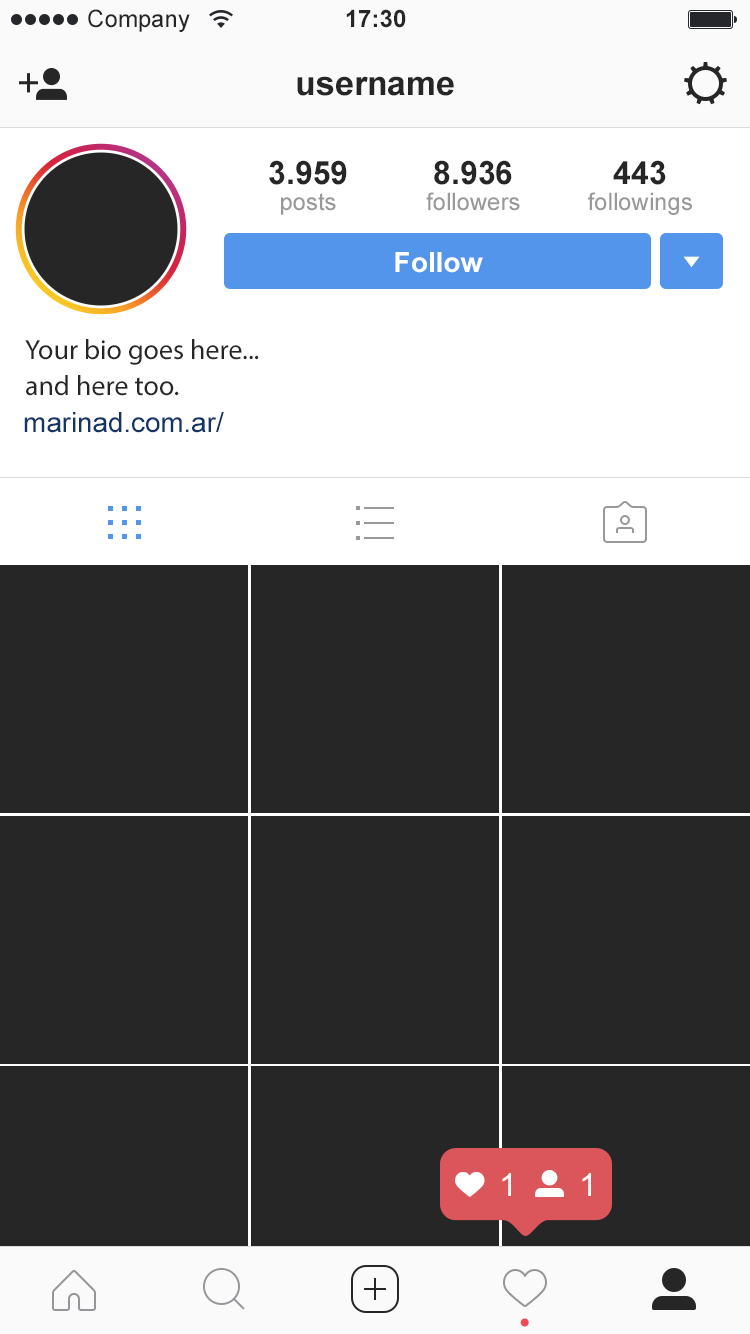
<style>
.page{position:relative;width:750px;height:1334px;background:#262627}
.page>*{position:absolute;margin:0}
.t1{font:24px "ArialMT";color:#262626}
.t2{font:24px "Arial-BoldMT";color:#262626}
.t3{font:34px "Arial-BoldMT";letter-spacing:-0.005em;color:#262627}
.t4{font:32px "Arial-BoldMT";color:#262626}
.t5{font:24px "ArialMT";color:#999999}
.t6{font:28px "Arial-BoldMT";color:#ffffff}
.t7{font:28px/36px "MyriadPro-Regular";color:#262627}
.t8{font:27.7px "ArialMT";color:#133566}
.t9{font:32px "ArialMT";color:#ffffff}
</style>
<div class="page">
<p class="t1" style="left:88px;top:9px;width:102px;height:23px">Company</p>
<p class="t2" style="left:346px;top:9px;width:60px;height:19px">17:30</p>
<p class="t3" style="left:297px;top:76px;width:157px;height:20px">username</p>
<p class="t4" style="left:269px;top:160px;width:78px;height:25px">3.959</p>
<p class="t4" style="left:434px;top:160px;width:78px;height:25px">8.936</p>
<p class="t4" style="left:613px;top:160px;width:53px;height:25px">443</p>
<p class="t5" style="left:281px;top:193px;width:55px;height:22px">posts</p>
<p class="t5" style="left:426px;top:192px;width:94px;height:19px">followers</p>
<p class="t5" style="left:588px;top:192px;width:104px;height:23px">followings</p>
<p class="t6" style="left:395px;top:252px;width:88px;height:21px">Follow</p>
<p class="t7" style="left:25px;top:339px;width:234px;height:57px">Your bio goes here...<br>and here too.</p>
<p class="t8" style="left:24px;top:412px;width:200px;height:21px">marinad.com.ar/</p>
<p class="t9" style="left:502px;top:1173px;width:9px;height:23px">1</p>
<p class="t9" style="left:582px;top:1173px;width:9px;height:23px">1</p>
</div>
